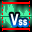
<style>
.page{position:relative;width:32px;height:32px}
.page>*{position:absolute;margin:0}
.t1{font:11px "ArialNarrow-Bold";color:#ffffff;scale:0.9 1}
.t2{font:16px "ArialNarrow-Bold";color:#ffffff;scale:0.9 1}
</style>
<div class="page">
<p class="t1" style="left:10px;top:13px;width:18px;height:13px"><span class="t2">V</span>ss</p>
</div>
